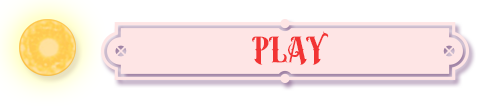
<style>
.page{position:relative;width:484px;height:106px;background:#ffffff}
.page>*{position:absolute;margin:0}
.t1{font:41.7px "Moyers";color:#f23434}
</style>
<div class="page">
<p class="t1" style="left:252px;top:31px;width:77px;height:34px">PLAY</p>
</div>
